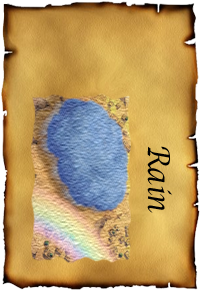
<style>
.page{position:relative;width:200px;height:290px}
.page>*{position:absolute;margin:0}
.t1{font:30.5px "LucidaCalligraphy-Italic";color:#000000;scale:0.85 1}
</style>
<div class="page">
<p class="t1" style="left:147px;top:146px;width:25px;height:67px;rotate:90deg">Rain</p>
</div>
